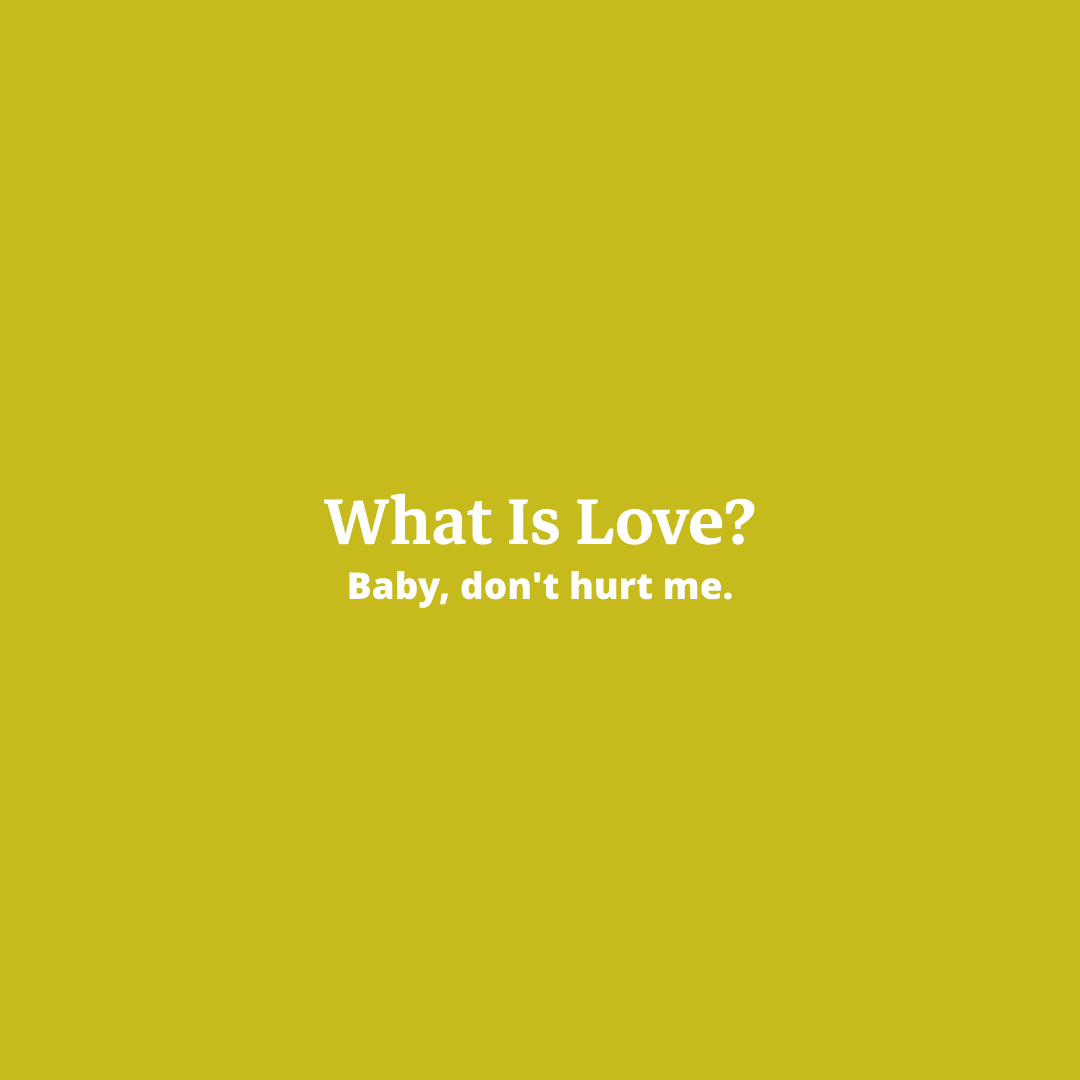
<style>
.page{position:relative;width:1080px;height:1080px;background:#c6ba1c}
.page>*{position:absolute;margin:0}
.t1{font:92px "MarkaziText-SemiBold";color:#ffffff}
.t2{font:37px "NotoSans-Black";color:#ffffff}
</style>
<div class="page">
<p class="t1" style="left:323px;top:493px;width:432px;height:52px">What Is Love?</p>
<p class="t2" style="left:349px;top:570px;width:383px;height:38px">Baby, don't hurt me.</p>
</div>
